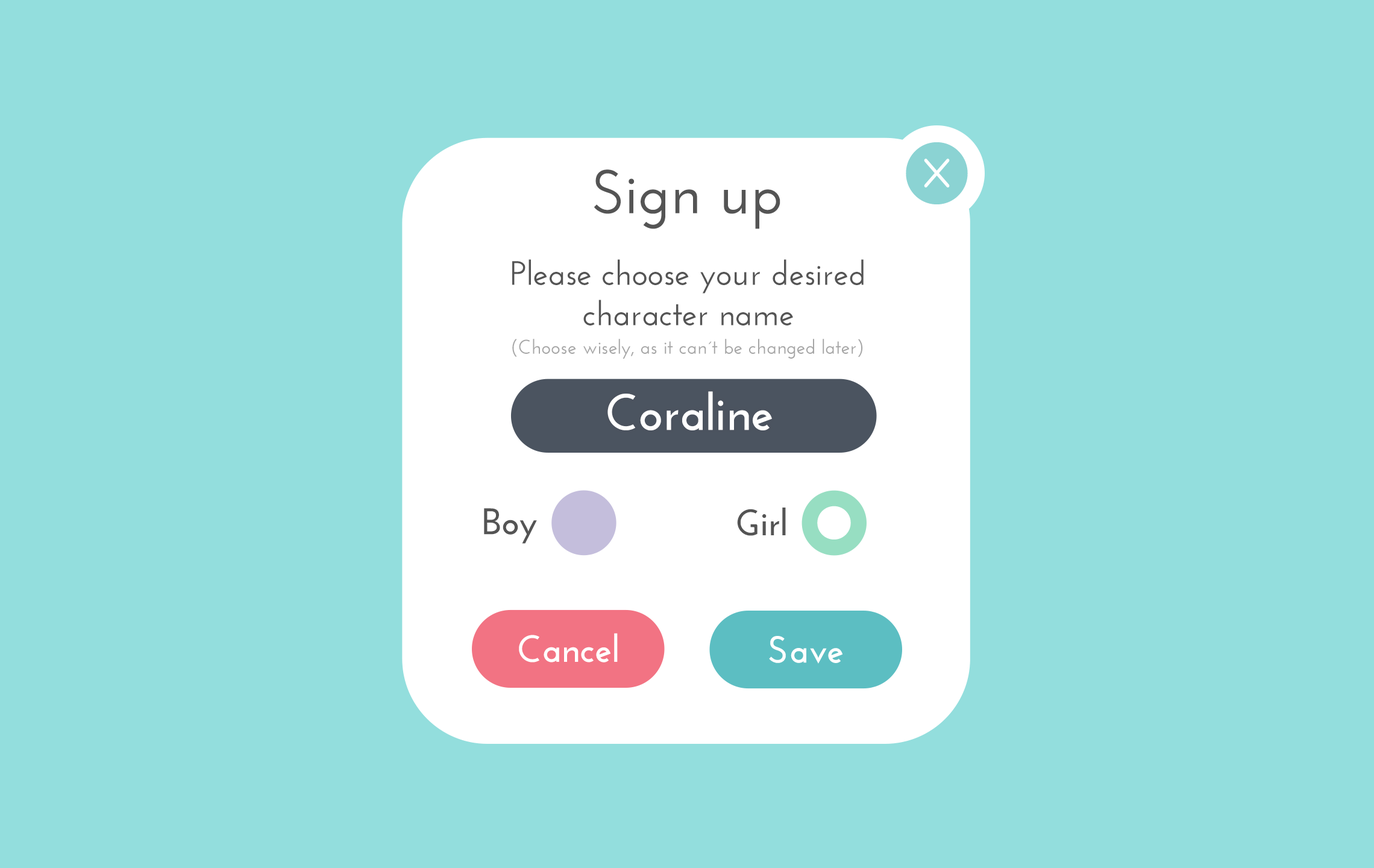
<style>
.page{position:relative;width:1374px;height:868px;background:#93dedd}
.page>*{position:absolute;margin:0}
.t1{font:61.7px "JosefinSans-SemiBold";color:#545454}
.t2{font:33.7px/40.5px "JosefinSans-SemiBold";color:#545454}
.t3{font:19.7px "JosefinSans-SemiBold";color:#999999}
.t4{font:51.3px "JosefinSans-Bold";color:#ffffff}
.t5{font:37px "JosefinSans-Bold";color:#545454}
.t6{font:37.9px "JosefinSans-Bold";color:#ffffff}
</style>
<div class="page">
<p class="t1" style="left:594px;top:169px;width:186px;height:60px">Sign up</p>
<p class="t2" style="left:512px;top:259px;width:352px;height:66px;text-align:center">Please choose your desired <br>character name</p>
<p class="t3" style="left:512px;top:339px;width:351px;height:20px;opacity:0.89">(Choose wisely, as it can´t be changed later)</p>
<p class="t4" style="left:607px;top:391px;width:165px;height:39px">Coraline</p>
<p class="t5" style="left:484px;top:508px;width:53px;height:36px">Boy</p>
<p class="t5" style="left:737px;top:507px;width:49px;height:29px">Girl</p>
<p class="t6" style="left:519px;top:633px;width:99px;height:29px">Cancel</p>
<p class="t6" style="left:769px;top:636px;width:74px;height:28px">Save</p>
</div>
